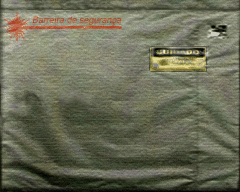
<style>
.page{position:relative;width:240px;height:192px}
.page>*{position:absolute;margin:0}
.t1{font:9px "ArialMT";color:#b0563a;font-style:italic}
.t2{font:6.3px "Arial-Black";scale:1.35 1}
</style>
<div class="page">
<p class="t1" style="left:32px;top:16px;width:90px;height:10px">Barreira de segurança</p>
<p class="t2" style="left:156px;top:49px;width:44px;height:6px">CUIDADO</p>
</div>
